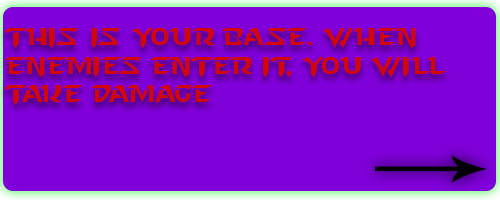
<style>
.page{position:relative;width:500px;height:200px;background:#8000d9}
.page>*{position:absolute;margin:0}
.t1{font:24px "StarcraftNormal";color:#d20606}
</style>
<div class="page">
<p class="t1" style="left:5px;top:28px;width:442px;height:77px">this is your base. When enemies enter it, you will take damage</p>
</div>
